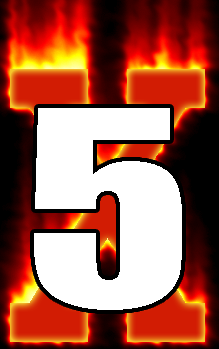
<style>
.page{position:relative;width:219px;height:349px;background:#ffffff}
.page>*{position:absolute;margin:0}
.t1{font:250px "Impact";letter-spacing:0.025em;color:#ffffff;font-variant:small-caps;scale:1.25 1}
</style>
<div class="page">
<p class="t1" style="left:34px;top:108px;width:148px;height:202px">5</p>
</div>
